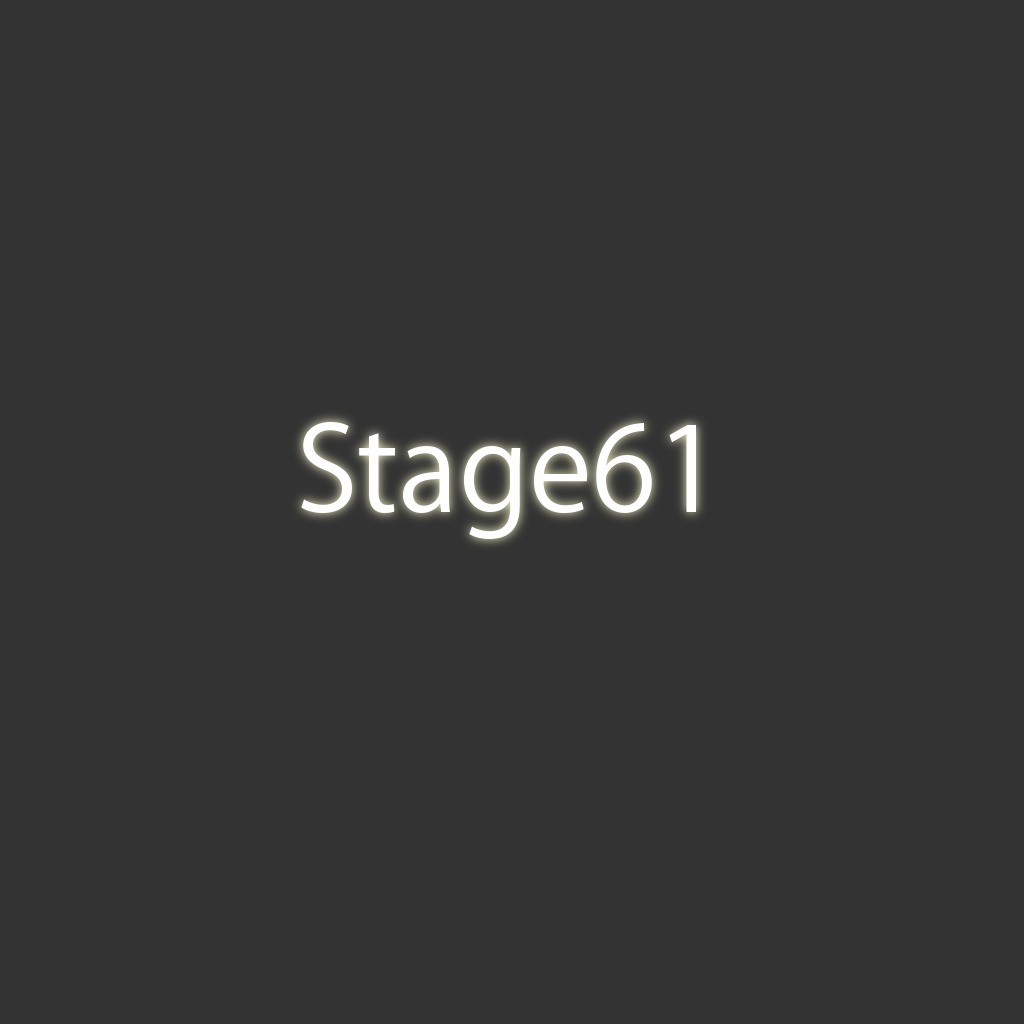
<style>
.page{position:relative;width:1024px;height:1024px;background:#333333}
.page>*{position:absolute;margin:0}
.t1{font:116.7px "KozGoPr6N-Regular";color:#fefefe}
</style>
<div class="page">
<p class="t1" style="left:301px;top:421px;width:395px;height:118px">Stage61</p>
</div>
